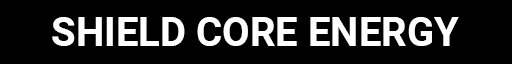
<style>
.page{position:relative;width:512px;height:64px;background:#000000}
.page>*{position:absolute;margin:0}
.t1{font:40px "Roboto-Bold";color:#ffffff;text-transform:uppercase}
</style>
<div class="page">
<p class="t1" style="left:52px;top:17px;width:407px;height:29px">SHIELD CORE ENERGY</p>
</div>
